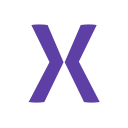
<style>
.page{position:relative;width:128px;height:128px;background:#ffffff}
.page>*{position:absolute;margin:0}
.t1{font:150px "Aller";color:#5e3fa5}
</style>
<div class="page">
<p class="t1" style="left:28px;top:24px;width:72px;height:79px">x</p>
</div>
